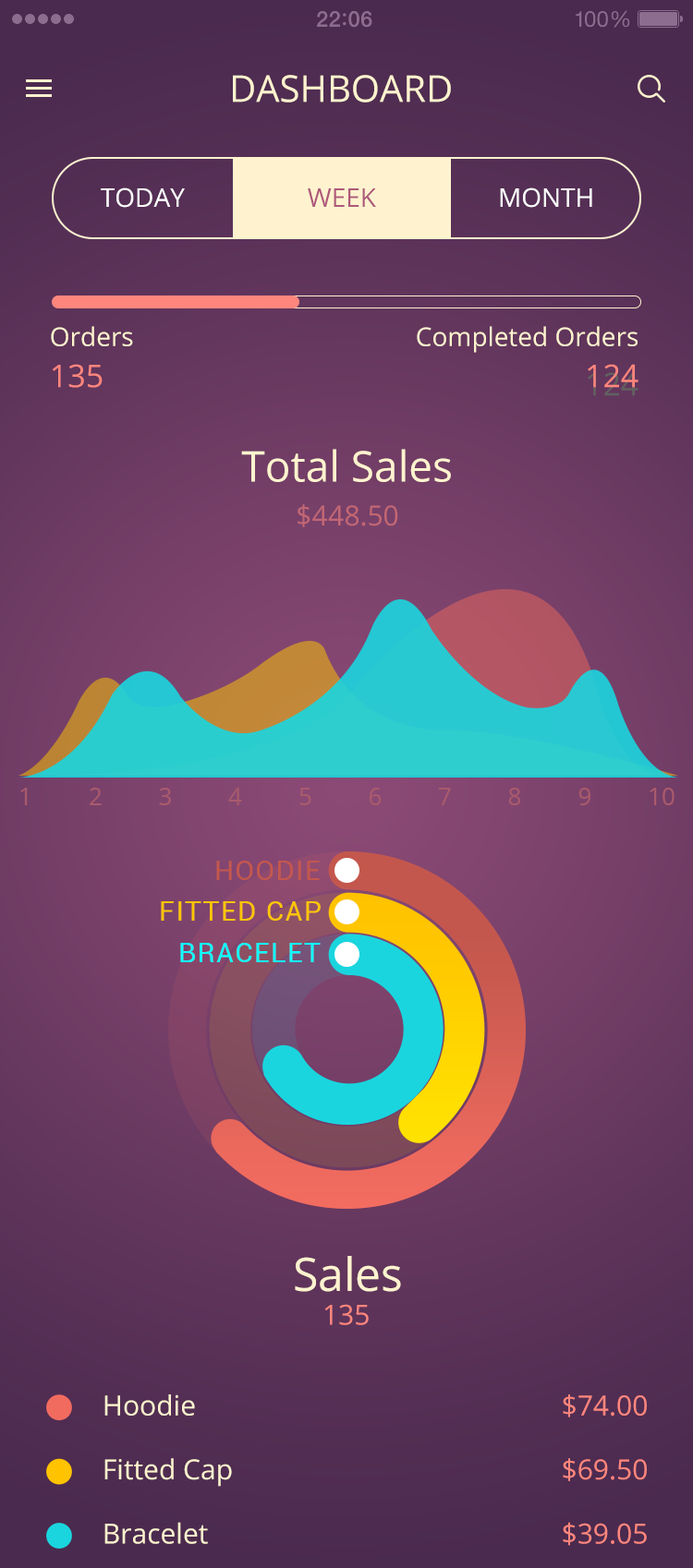
<style>
.page{position:relative;width:693px;height:1568px}
.page>*{position:absolute;margin:0}
.t1{font:36.9px "OpenSans";color:#fff3cf;text-transform:uppercase}
.t2{font:25.9px "OpenSans";color:#ffffff;text-transform:uppercase}
.t3{font:25.9px "OpenSans";color:#ae587a;text-transform:uppercase}
.t4{font:25.9px "OpenSans";color:#fff3cf}
.t5{font:31.4px "OpenSans";color:#ff867d}
.t6{font:31.4px "OpenSans";color:#616161}
.t7{font:42.5px "OpenSans";color:#fff3cf}
.t8{font:27.7px "OpenSans";color:#c36773}
.t9{font:24px "OpenSans";color:#a9596c}
.t10{font:27.7px "Roboto-Regular";letter-spacing:0.05em;color:#c4574d;text-transform:uppercase}
.t11{font:27.7px "Roboto-Regular";letter-spacing:0.05em;color:#ffc500;text-transform:uppercase}
.t12{font:27.7px "Roboto-Regular";letter-spacing:0.05em;color:#10ffff;text-transform:uppercase}
.t13{font:46.2px "OpenSans";color:#fff3cf}
.t14{font:27.7px "OpenSans";color:#ff867d}
.t15{font:27.7px "OpenSans";color:#fff3cf}
</style>
<div class="page">
<p class="t1" style="left:233px;top:75px;width:218px;height:28px">Dashboard</p>
<p class="t2" style="left:101px;top:187px;width:84px;height:21px">Today</p>
<p class="t3" style="left:308px;top:188px;width:68px;height:19px">Week</p>
<p class="t2" style="left:500px;top:187px;width:92px;height:21px">Month</p>
<p class="t4" style="left:51px;top:326px;width:82px;height:20px">Orders</p>
<p class="t4" style="left:416px;top:326px;width:221px;height:27px">Completed Orders</p>
<p class="t5" style="left:53px;top:364px;width:50px;height:24px">135</p>
<p class="t5" style="left:587px;top:364px;width:51px;height:24px">124</p>
<p class="t6" style="left:587px;top:372px;width:51px;height:24px">124</p>
<p class="t7" style="left:241px;top:449px;width:210px;height:33px">Total Sales</p>
<p class="t8" style="left:297px;top:504px;width:101px;height:23px">$448.50</p>
<p class="t9" style="left:20px;top:788px;width:654px;height:17px">1         2         3         4         5         6         7         8         9         10</p>
<p class="t10" style="left:216px;top:861px;width:104px;height:19px">Hoodie</p>
<p class="t11" style="left:161px;top:901px;width:159px;height:20px">Fitted Cap</p>
<p class="t12" style="left:180px;top:943px;width:140px;height:19px">Bracelet</p>
<p class="t13" style="left:295px;top:1256px;width:106px;height:36px">Sales</p>
<p class="t14" style="left:324px;top:1304px;width:44px;height:21px">135</p>
<p class="t15" style="left:104px;top:1394px;width:91px;height:22px">Hoodie</p>
<p class="t14" style="left:562px;top:1394px;width:84px;height:23px">$74.00</p>
<p class="t15" style="left:104px;top:1458px;width:128px;height:29px">Fitted Cap</p>
<p class="t14" style="left:562px;top:1458px;width:84px;height:23px">$69.50</p>
<p class="t15" style="left:104px;top:1522px;width:104px;height:22px">Bracelet</p>
<p class="t14" style="left:562px;top:1522px;width:84px;height:24px">$39.05</p>
</div>
